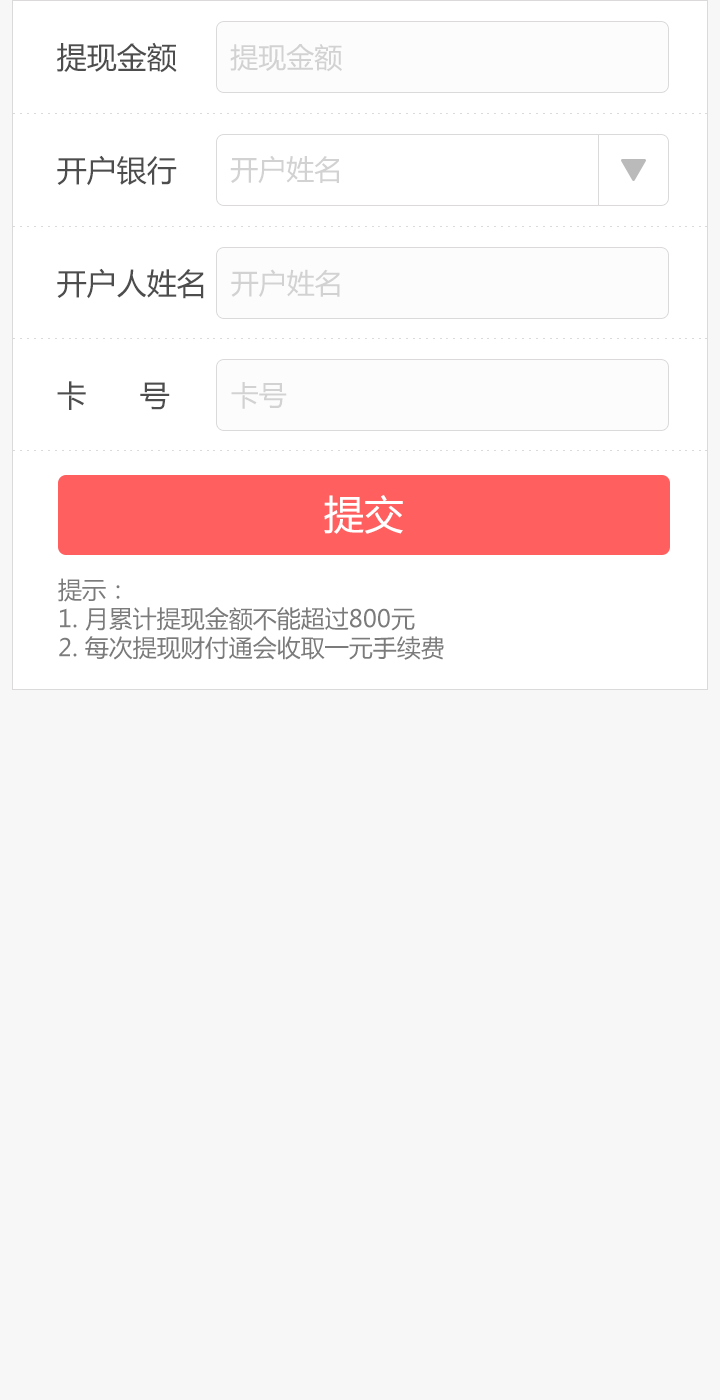
<style>
.page{position:relative;width:720px;height:1400px;background:#f7f7f7}
.page>*{position:absolute;margin:0}
.t1{font:30px "MicrosoftYaHei";color:#4d4d4d}
.t2{font:28px "MicrosoftYaHei";color:#d2d2d2}
.t3{font:40px "MicrosoftYaHei";color:#ffffff}
.t4{font:24px "MicrosoftYaHei";color:#7b7b7b}
</style>
<div class="page">
<p class="t1" style="left:57px;top:42px;width:120px;height:31px">提现金额</p>
<p class="t2" style="left:230px;top:44px;width:112px;height:28px">提现金额</p>
<p class="t1" style="left:57px;top:155px;width:120px;height:31px">开户银行</p>
<p class="t2" style="left:230px;top:155px;width:109px;height:29px">开户姓名</p>
<p class="t1" style="left:57px;top:268px;width:147px;height:31px">开户人姓名</p>
<p class="t2" style="left:231px;top:269px;width:109px;height:28px">开户姓名</p>
<p class="t1" style="left:57px;top:381px;width:113px;height:29px">卡      号</p>
<p class="t2" style="left:231px;top:382px;width:56px;height:27px">卡号</p>
<p class="t3" style="left:324px;top:495px;width:79px;height:39px">提交</p>
<p class="t4" style="left:58px;top:578px;width:386px;height:82px">提示：<br>1. 月累计提现金额不能超过800元<br>2. 每次提现财付通会收取一元手续费</p>
</div>
